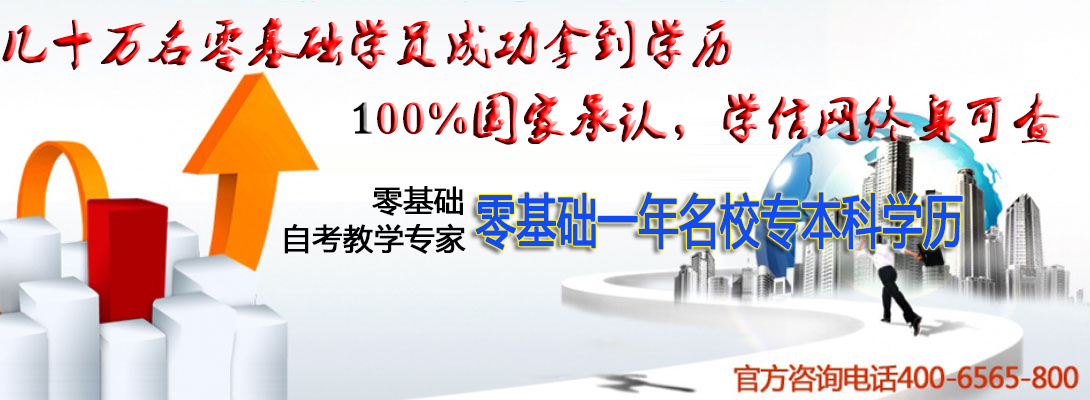
<style>
.page{position:relative;width:1090px;height:400px}
.page>*{position:absolute;margin:0}
.t1{font:48px "2.0-";font-weight:bold}
.t2{font:30px "MicrosoftYaHei";color:#000000;font-weight:bold}
.t3{font:57.6px "MicrosoftYaHei";color:#104bf4;font-weight:bold;scale:0.69 1}
</style>
<div class="page">
<p class="t1" style="left:2px;top:18px;width:730px;height:54px">几十万名零基础学员成功拿到学历</p>
<p class="t1" style="left:353px;top:91px;width:707px;height:54px">100%国家承认，学信网终身可查</p>
<p class="t2" style="left:372px;top:186px;width:91px;height:30px">零基础</p>
<p class="t3" style="left:475px;top:192px;width:488px;height:58px">零基础一年名校专本科学历</p>
<p class="t2" style="left:284px;top:223px;width:182px;height:31px">自考教学专家</p>
</div>
